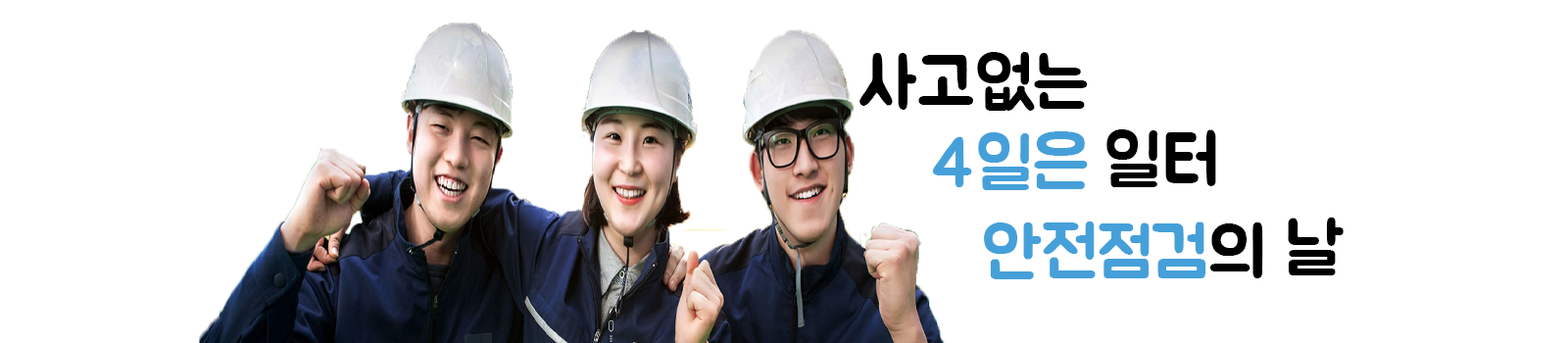
<style>
.page{position:relative;width:1568px;height:343px;background:#ffffff}
.page>*{position:absolute;margin:0}
.t1{font:70.6px "Jua-Regular";color:#000000}
.t2{font:70.6px "Jua-Regular";color:#45a0d9}
</style>
<div class="page">
<p class="t1" style="left:859px;top:52px;width:229px;height:59px">사고없는</p>
<p class="t2" style="left:932px;top:131px;width:156px;height:59px">4일은</p>
<p class="t1" style="left:1106px;top:129px;width:110px;height:58px">일터</p>
<p class="t2" style="left:984px;top:221px;width:279px;height:58px">안전점검<span class="t1">의</span></p>
<p class="t1" style="left:1288px;top:217px;width:56px;height:58px">날</p>
</div>
